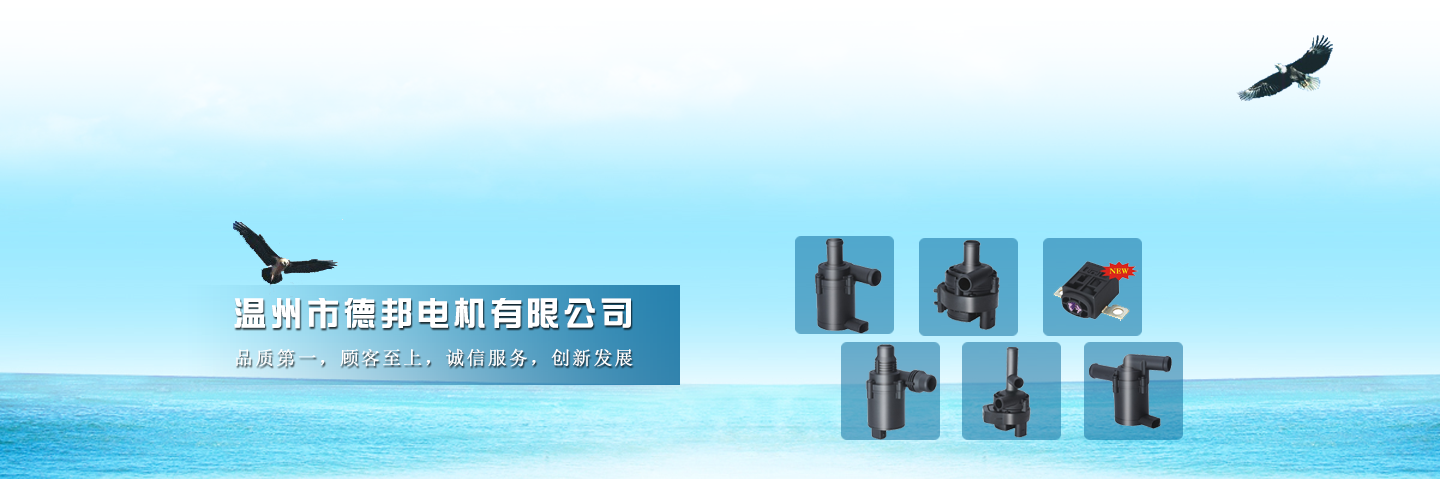
<style>
.page{position:relative;width:1440px;height:479px}
.page>*{position:absolute;margin:0}
.t1{font:33.3px "DFZongYi-Bd-80-Win-GB";letter-spacing:0.1em;color:#ffffff}
.t2{font:18.8px "SimSun";letter-spacing:0.1em;color:#ffffff;font-weight:bold}
</style>
<div class="page">
<p class="t1" style="left:234px;top:297px;width:397px;height:32px">温州市德邦电机有限公司</p>
<p class="t2" style="left:236px;top:348px;width:397px;height:19px">品质第一，顾客至上，诚信服务，创新发展</p>
</div>
